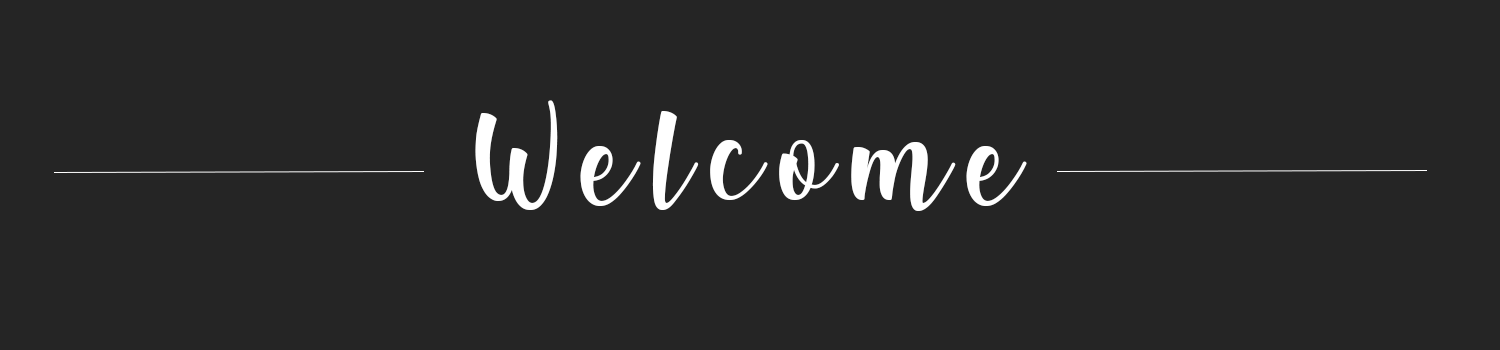
<style>
.page{position:relative;width:1500px;height:350px;background:#252525}
.page>*{position:absolute;margin:0}
.t1{font:118px "Shink";letter-spacing:0.14em;color:#ffffff}
</style>
<div class="page">
<p class="t1" style="left:475px;top:100px;width:552px;height:111px">Welcome</p>
</div>
